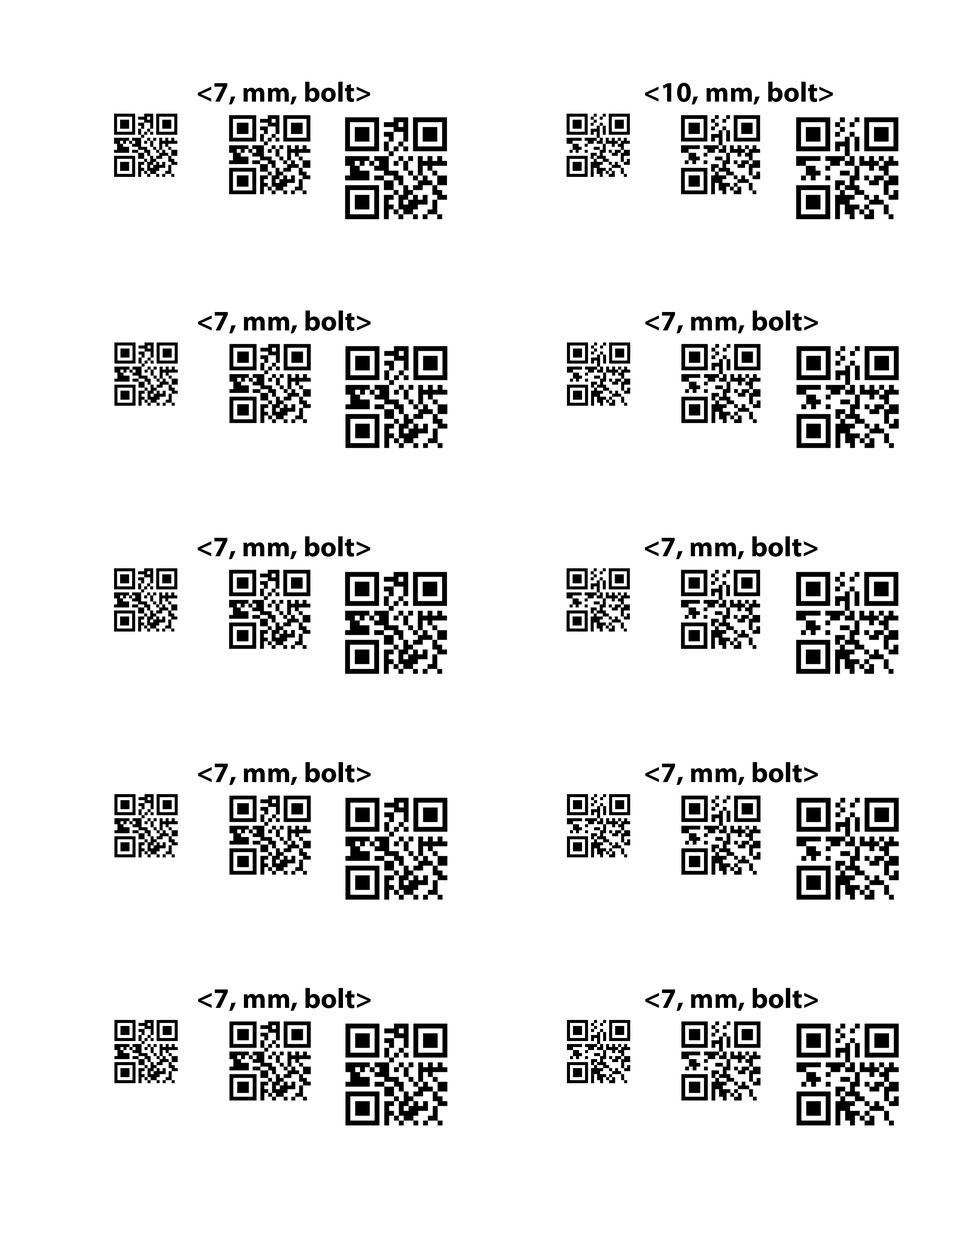
<style>
.page{position:relative;width:960px;height:1242px;background:#ffffff}
.page>*{position:absolute;margin:0}
.t1{font:28.2px "MyriadPro-Bold";color:#000000}
</style>
<div class="page">
<p class="t1" style="left:198px;top:82px;width:172px;height:23px">&lt;7, mm, bolt&gt;</p>
<p class="t1" style="left:645px;top:82px;width:188px;height:23px">&lt;10, mm, bolt&gt;</p>
</div>
